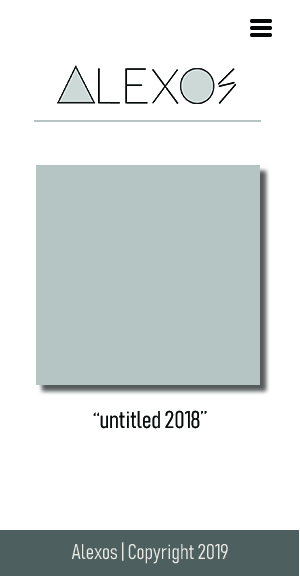
<style>
.page{position:relative;width:300px;height:576px;background:#ffffff}
.page>*{position:absolute;margin:0}
.t1{font:24px "Bahnschrift-LightCondensed";color:#090b0b}
.t2{font:21.1px "Bahnschrift-LightCondensed";color:#e9e9e4}
</style>
<div class="page">
<p class="t1" style="left:93px;top:410px;width:114px;height:19px">“untitled 2018”</p>
<p class="t2" style="left:71px;top:542px;width:157px;height:22px">Alexos | Copyright 2019</p>
</div>
